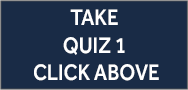
<style>
.page{position:relative;width:188px;height:90px;background:#192b46}
.page>*{position:absolute;margin:0}
.t1{font:23.1px "Effra-Medium";color:#ffffff;text-transform:uppercase;scale:0.88 1}
</style>
<div class="page">
<p class="t1" style="left:34px;top:9px;width:125px;height:72px;text-align:center">Take <br>Quiz 1 <br>Click aboVe</p>
</div>
